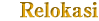
<style>
.page{position:relative;width:99px;height:21px;background:#ffffff}
.page>*{position:absolute;margin:0}
.t1{font:20px "RyuminPro-ExBold";letter-spacing:-0.04em;font-weight:bold}
</style>
<div class="page">
<p class="t1" style="left:20px;top:2px;width:78px;height:16px">Relokasi</p>
</div>
